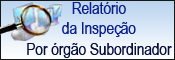
<style>
.page{position:relative;width:175px;height:60px}
.page>*{position:absolute;margin:0}
.t1{font:17.2px "ArialNarrow";color:#060e3c;scale:0.96 1}
.t2{font:17.2px "ArialNarrow";color:#091d8d;scale:0.96 1}
</style>
<div class="page">
<p class="t1" style="left:27px;top:2px;width:145px;height:56px;text-align:center"><span class="t2">Relatório<br>da Inspeção<br></span>Por órgão Subordinador</p>
</div>
